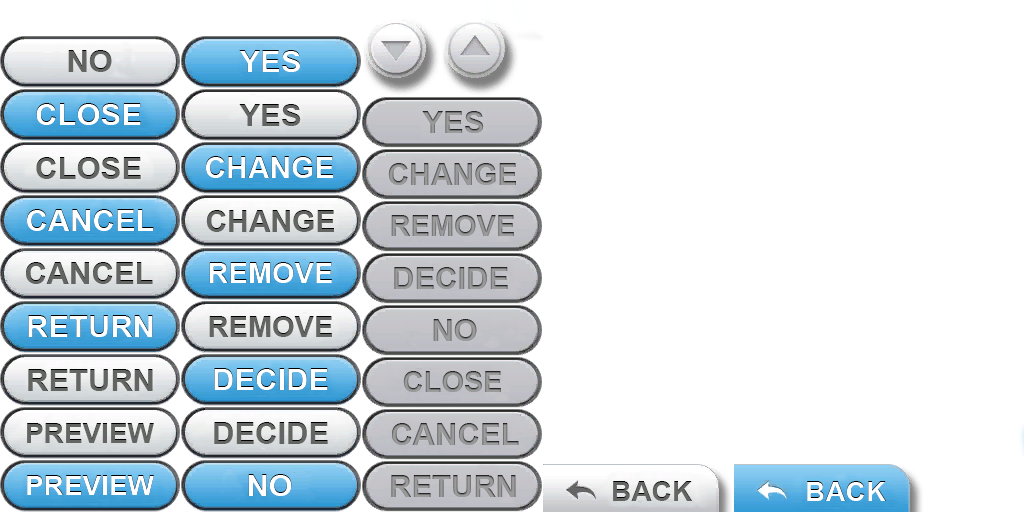
<style>
.page{position:relative;width:1024px;height:512px;background:#ffffff}
.page>*{position:absolute;margin:0}
.t1{font:31px "Arial-BoldMT";color:#636563}
.t2{font:31px "Arial-BoldMT";color:#ffffff}
.t3{font:31px "Arial-BoldMT";color:#9c9b9c}
.t4{font:30px "Arial-BoldMT";color:#ffffff}
.t5{font:30px "Arial-BoldMT";color:#9c9b9c}
.t6{font:30px "Arial-BoldMT";color:#636563}
.t7{font:29px "Arial-BoldMT";color:#9c9b9c}
.t8{font:29px "Arial-BoldMT";color:#ffffff}
.t9{font:29px "Arial-BoldMT";color:#636563}
.t10{font:28px "Arial-BoldMT";color:#636563}
.t11{font:28px "Arial-BoldMT";color:#ffffff}
</style>
<div class="page">
<p class="t1" style="left:68px;top:50px;width:44px;height:22px">NO</p>
<p class="t2" style="left:239px;top:50px;width:62px;height:22px">YES</p>
<p class="t2" style="left:36px;top:103px;width:105px;height:22px">CLOSE</p>
<p class="t1" style="left:239px;top:104px;width:62px;height:22px">YES</p>
<p class="t3" style="left:422px;top:111px;width:62px;height:22px">YES</p>
<p class="t1" style="left:36px;top:157px;width:105px;height:22px">CLOSE</p>
<p class="t4" style="left:205px;top:156px;width:128px;height:22px">CHANGE</p>
<p class="t5" style="left:388px;top:163px;width:128px;height:22px">CHANGE</p>
<p class="t2" style="left:27px;top:209px;width:127px;height:22px">CANCEL</p>
<p class="t6" style="left:206px;top:210px;width:128px;height:22px">CHANGE</p>
<p class="t7" style="left:391px;top:215px;width:123px;height:21px">REMOVE</p>
<p class="t1" style="left:26px;top:262px;width:127px;height:22px">CANCEL</p>
<p class="t8" style="left:209px;top:262px;width:123px;height:21px">REMOVE</p>
<p class="t3" style="left:394px;top:267px;width:114px;height:22px">DECIDE</p>
<p class="t2" style="left:28px;top:315px;width:125px;height:22px">RETURN</p>
<p class="t9" style="left:209px;top:316px;width:123px;height:21px">REMOVE</p>
<p class="t3" style="left:433px;top:319px;width:44px;height:22px">NO</p>
<p class="t1" style="left:28px;top:369px;width:125px;height:22px">RETURN</p>
<p class="t2" style="left:214px;top:368px;width:114px;height:22px">DECIDE</p>
<p class="t7" style="left:403px;top:371px;width:98px;height:21px">CLOSE</p>
<p class="t10" style="left:27px;top:423px;width:127px;height:20px">PREVIEW</p>
<p class="t1" style="left:214px;top:422px;width:114px;height:22px">DECIDE</p>
<p class="t3" style="left:392px;top:423px;width:127px;height:22px">CANCEL</p>
<p class="t11" style="left:27px;top:475px;width:127px;height:20px">PREVIEW</p>
<p class="t2" style="left:248px;top:474px;width:44px;height:22px">NO</p>
<p class="t3" style="left:391px;top:475px;width:125px;height:22px">RETURN</p>
<p class="t10" style="left:613px;top:481px;width:79px;height:20px">BACK</p>
<p class="t11" style="left:807px;top:481px;width:79px;height:20px">BACK</p>
</div>
